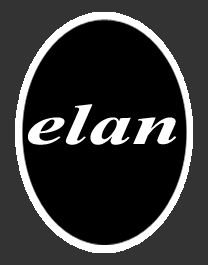
<style>
.page{position:relative;width:208px;height:265px;background:#000000}
.page>*{position:absolute;margin:0}
.t1{font:72px "Vijaya-Bold";color:#ffffff;scale:1.5 1}
</style>
<div class="page">
<p class="t1" style="left:28px;top:104px;width:149px;height:41px">elan</p>
</div>
